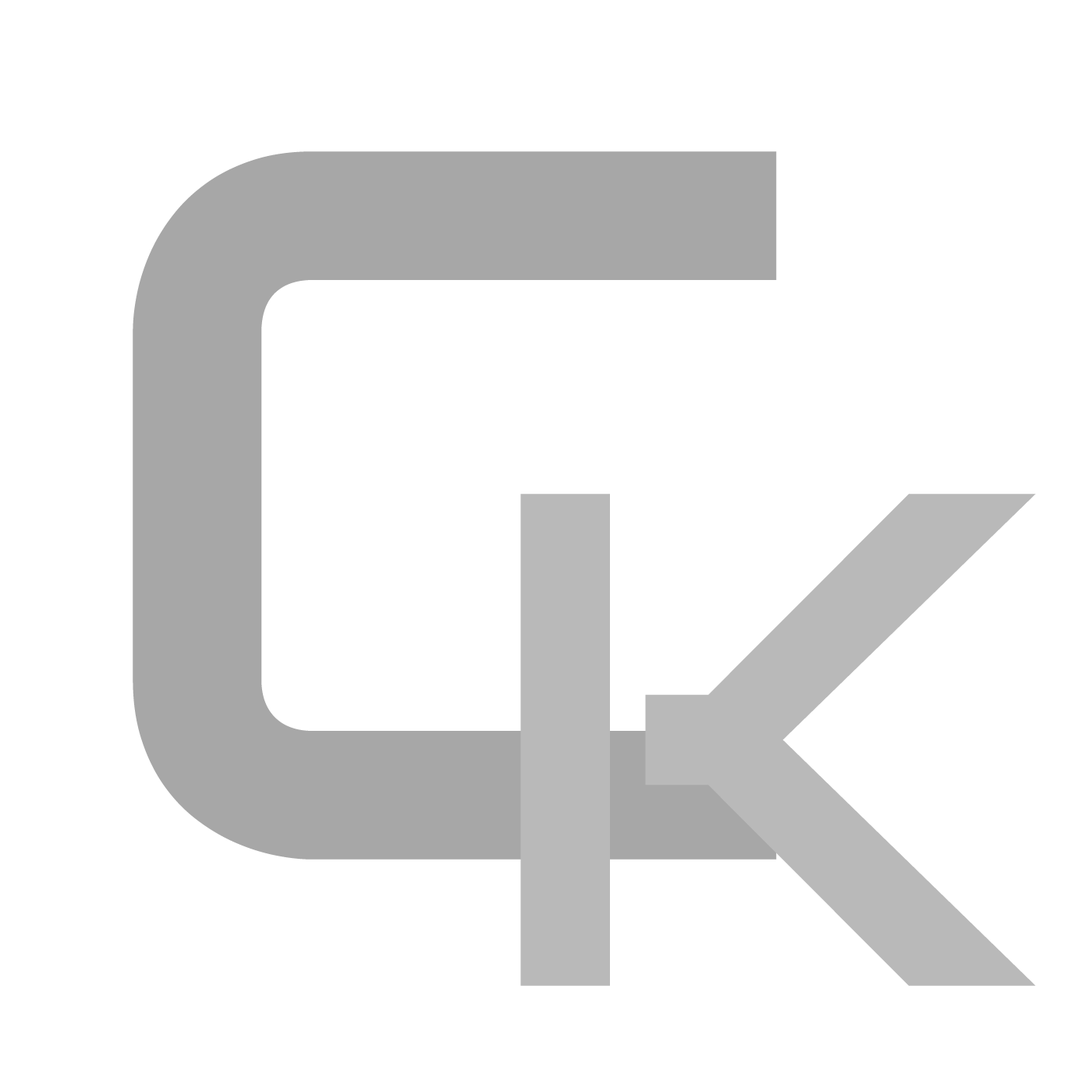
<style>
.page{position:relative;width:1092px;height:1092px;background:#ffffff}
.page>*{position:absolute;margin:0}
.t1{font:1010.9px "Audiowide-Regular";color:#a7a7a7}
.t2{font:702px "Audiowide-Regular";color:#b9b9b9}
</style>
<div class="page">
<p class="t1" style="left:133px;top:151px;width:644px;height:709px">C</p>
<p class="t2" style="left:520px;top:494px;width:516px;height:492px">K</p>
</div>
